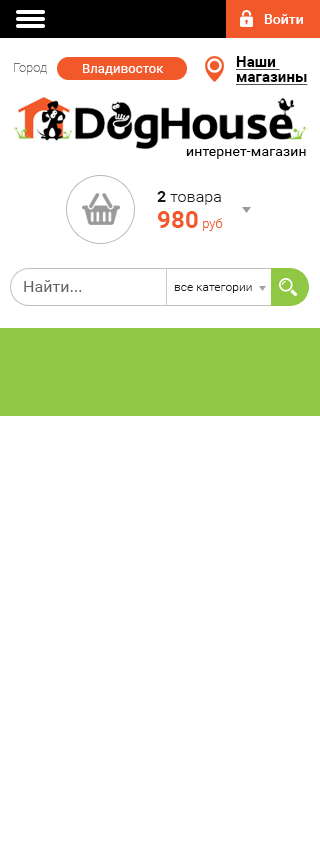
<style>
.page{position:relative;width:320px;height:861px;background:#ffffff}
.page>*{position:absolute;margin:0}
.t1{font:14px "Roboto-Medium";color:#ffffff}
.t2{font:13px "Roboto-Thin";color:#6f6f6f}
.t3{font:13px "Roboto-Regular";letter-spacing:0.01em;color:#ffffff}
.t4{font:15px/15px "Roboto-Bold";letter-spacing:0.005em;color:#000000;text-decoration:underline}
.t5{font:14px "Roboto-Regular";letter-spacing:0.01em;color:#000000}
.t6{font:16px "Roboto-Light";letter-spacing:0.005em;color:#1b1b1b}
.t7{font:16px "Roboto-Bold";letter-spacing:0.005em;color:#1b1b1b}
.t8{font:24px "Roboto-Bold";letter-spacing:0.005em;color:#f1592a}
.t9{font:13px "Roboto-Light";letter-spacing:0.005em;color:#f1592a}
.t10{font:16px "Roboto-Regular";letter-spacing:0.005em;color:#646363}
.t11{font:12px "Roboto-Light";letter-spacing:0.005em;color:#1b1b1b}
</style>
<div class="page">
<p class="t1" style="left:264px;top:14px;width:39px;height:10px">Войти</p>
<p class="t2" style="left:14px;top:63px;width:33px;height:12px">Город</p>
<p class="t3" style="left:83px;top:64px;width:81px;height:11px">Владивосток</p>
<p class="t4" style="left:236px;top:56px;width:72px;height:29px">Наши <br>магазины</p>
<p class="t5" style="left:186px;top:149px;width:120px;height:10px">интернет-магазин</p>
<p class="t6" style="left:157px;top:191px;width:64px;height:14px"><span class="t7">2</span> товара</p>
<p class="t8" style="left:158px;top:211px;width:65px;height:20px">980 <span class="t9">руб</span></p>
<p class="t10" style="left:24px;top:280px;width:58px;height:12px">Найти...</p>
<p class="t11" style="left:174px;top:285px;width:78px;height:8px">все категории</p>
</div>
